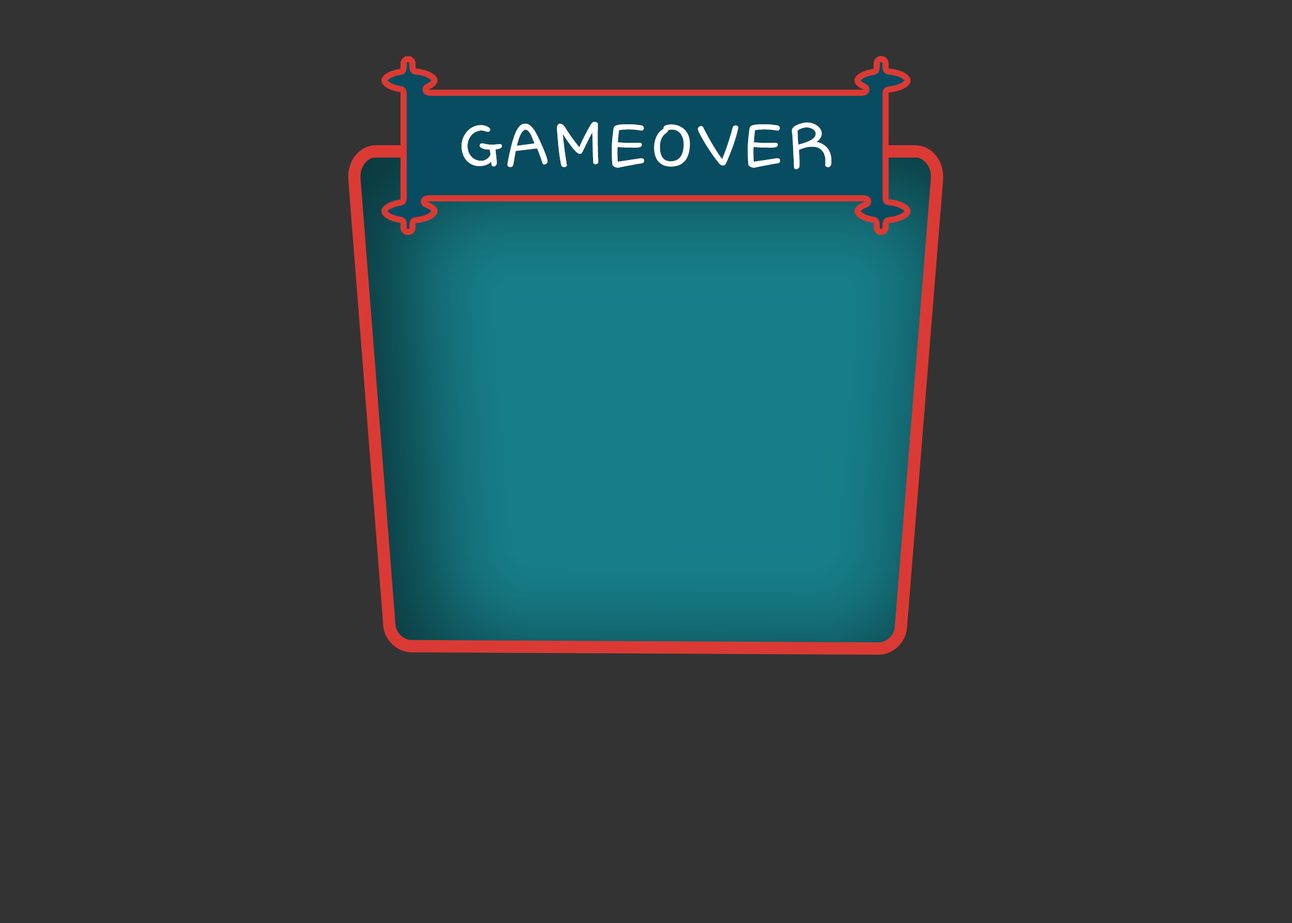
<style>
.page{position:relative;width:1292px;height:923px;background:#333333}
.page>*{position:absolute;margin:0}
.t1{font:64.1px "Chococooky";letter-spacing:0.06em;color:#ffffff;scale:1.13 1}
</style>
<div class="page">
<p class="t1" style="left:461px;top:122px;width:371px;height:47px">GAMEOVER</p>
</div>
